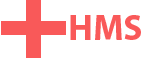
<style>
.page{position:relative;width:150px;height:58px;background:#ffffff}
.page>*{position:absolute;margin:0}
.t1{font:36px "MyriadPro-Bold";color:#f95959}
</style>
<div class="page">
<p class="t1" style="left:70px;top:15px;width:71px;height:25px">HMS</p>
</div>
